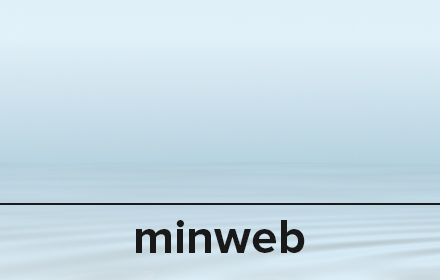
<style>
.page{position:relative;width:440px;height:280px}
.page>*{position:absolute;margin:0}
.t1{font:48px "ProximaNova-Bold";color:#191919}
</style>
<div class="page">
<p class="t1" style="left:136px;top:220px;width:169px;height:33px">minweb</p>
</div>
